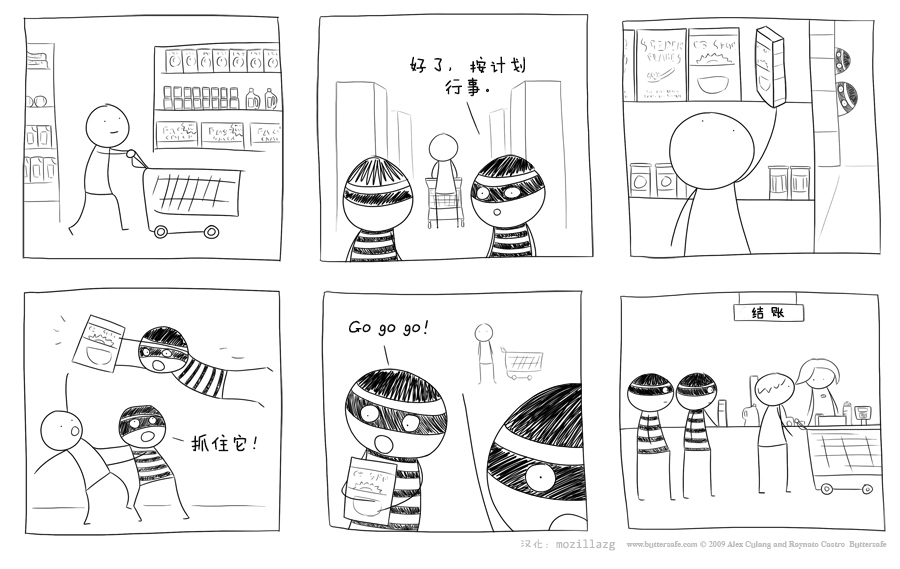
<style>
.page{position:relative;width:900px;height:569px;background:#ffffff}
.page>*{position:absolute;margin:0}
.t1{font:20px/22px "FZMWJW--GB1-0";color:#0e0e0e}
.t2{font:14px "FZMWJW--GB1-0";letter-spacing:0.42em;color:#0e0e0e;font-weight:bold}
.t3{font:22px "FZMWJW--GB1-0";color:#0e0e0e}
.t4{font:20px "FZMWJW--GB1-0";color:#0e0e0e}
.t5{font:12px "YaHei-Consolas-Hybrid";color:#bcbcbc}
.t6{font:12px "FZMWJW--GB1-0";color:#bcbcbc}
</style>
<div class="page">
<p class="t1" style="left:410px;top:56px;width:115px;height:41px">好了，按计划<br>     行事。</p>
<p class="t2" style="left:751px;top:306px;width:34px;height:13px">结账</p>
<p class="t3" style="left:349px;top:320px;width:79px;height:17px">Go go go！</p>
<p class="t4" style="left:191px;top:434px;width:66px;height:18px">抓住它！</p>
<p class="t5" style="left:521px;top:539px;width:94px;height:12px"><span class="t6">汉化：</span>mozillazg</p>
</div>
